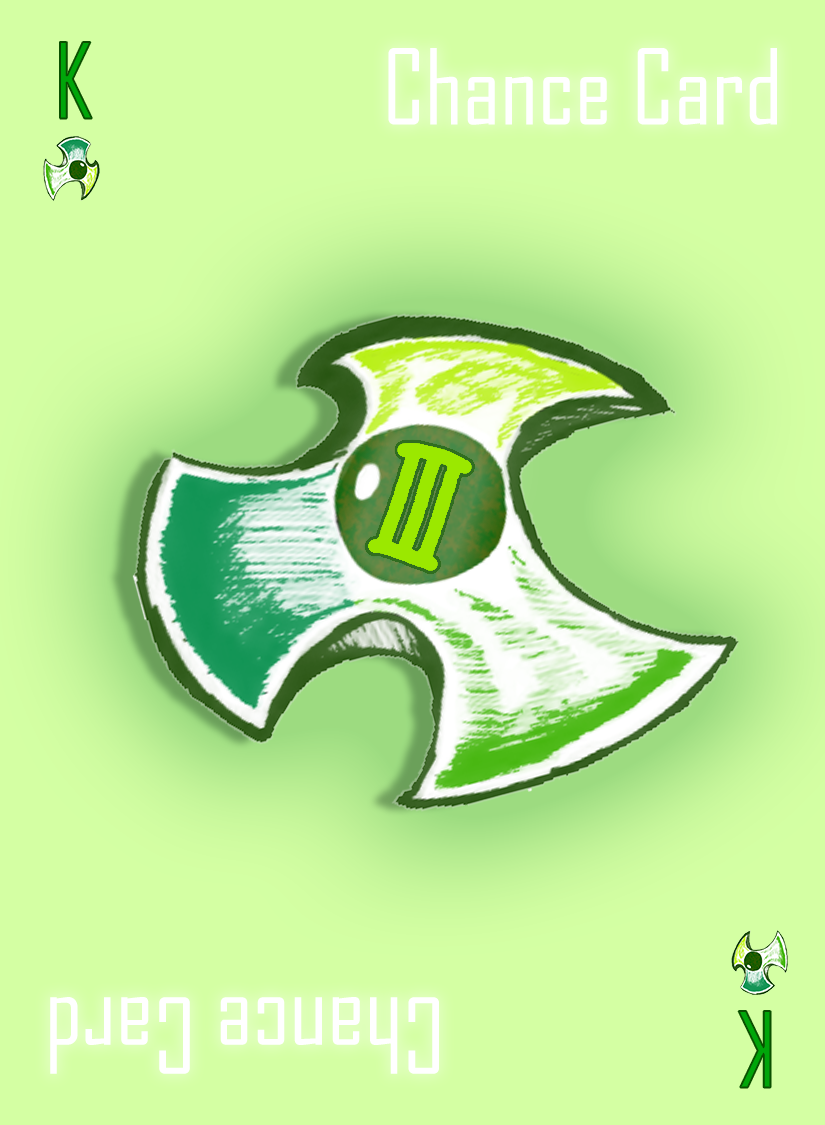
<style>
.page{position:relative;width:825px;height:1125px;background:#d4ffa3}
.page>*{position:absolute;margin:0}
.t1{font:100px "AgencyFB-Reg";color:#00a60a}
.t2{font:100px "AgencyFB-Reg";color:#ffffff}
</style>
<div class="page">
<p class="t1" style="left:60px;top:42px;width:32px;height:77px">K</p>
<p class="t2" style="left:388px;top:48px;width:389px;height:77px">Chance Card</p>
<p class="t2" style="left:50px;top:997px;width:389px;height:77px;rotate:180deg">Chance Card</p>
<p class="t1" style="left:738px;top:1011px;width:33px;height:77px;rotate:180deg">K</p>
</div>
